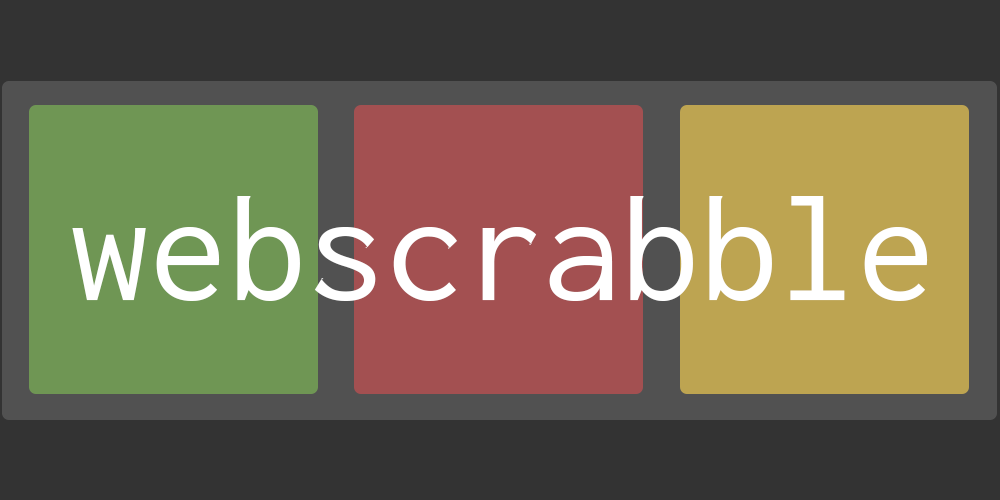
<style>
.page{position:relative;width:1000px;height:500px;background:#333333}
.page>*{position:absolute;margin:0}
.t1{font:157.4px "Inconsolata-Regular";color:#ffffff}
</style>
<div class="page">
<p class="t1" style="left:72px;top:196px;width:856px;height:105px">webscrabble</p>
</div>
